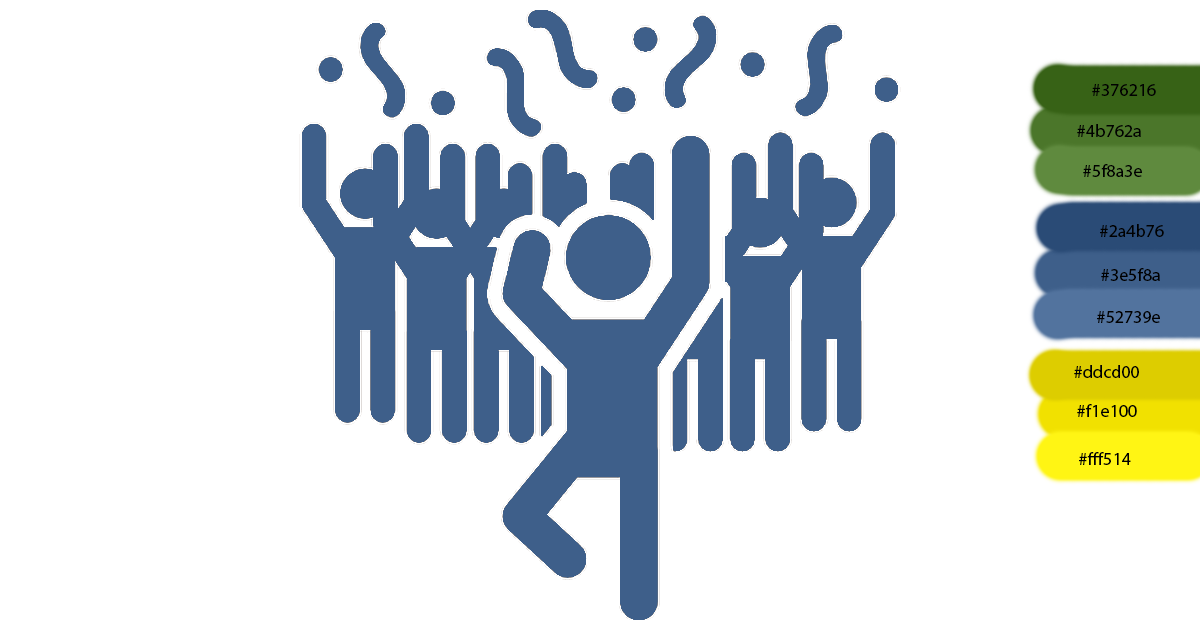
<style>
.page{position:relative;width:1200px;height:630px;background:#ffffff}
.page>*{position:absolute;margin:0}
.t1{font:18px "MyriadPro-Regular";color:#000000}
</style>
<div class="page">
<p class="t1" style="left:1092px;top:84px;width:64px;height:12px">#376216</p>
<p class="t1" style="left:1077px;top:124px;width:64px;height:13px">#4b762a</p>
<p class="t1" style="left:1083px;top:164px;width:59px;height:13px">#5f8a3e</p>
<p class="t1" style="left:1100px;top:224px;width:64px;height:13px">#2a4b76</p>
<p class="t1" style="left:1101px;top:268px;width:59px;height:13px">#3e5f8a</p>
<p class="t1" style="left:1097px;top:311px;width:63px;height:12px">#52739e</p>
<p class="t1" style="left:1074px;top:365px;width:65px;height:13px">#ddcd00</p>
<p class="t1" style="left:1077px;top:404px;width:60px;height:13px">#f1e100</p>
<p class="t1" style="left:1079px;top:452px;width:52px;height:13px">#fff514</p>
</div>
